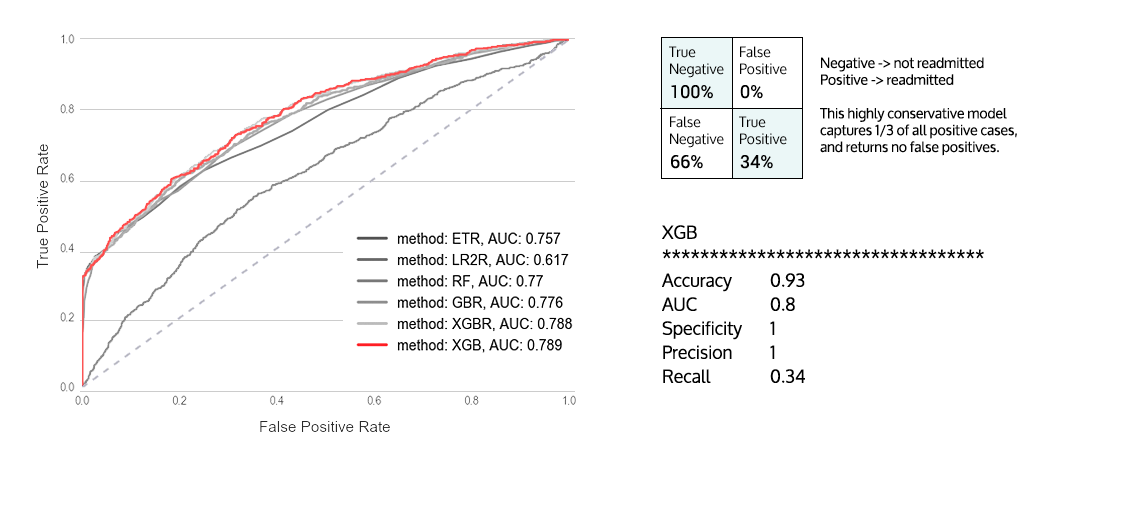
<style>
.page{position:relative;width:1140px;height:520px;background:#ffffff}
.page>*{position:absolute;margin:0}
.t1{font:14px "Oxygen";color:#000000}
.t2{font:18px "Roboto-Regular";color:#000000}
.t3{font:18px/24px "Oxygen";color:#000000}
</style>
<div class="page">
<p class="t1" style="left:669px;top:46px;width:55px;height:32px">True<br>Negative</p>
<p class="t1" style="left:740px;top:46px;width:47px;height:29px">False<br>Positive</p>
<p class="t1" style="left:820px;top:57px;width:197px;height:99px">Negative -&gt; not readmitted<br>Positive -&gt; readmitted<br><br>This highly conservative model <br>captures 1/3 of all positive cases,<br>and returns no false positives.</p>
<p class="t2" style="left:671px;top:85px;width:42px;height:14px">100%</p>
<p class="t2" style="left:740px;top:85px;width:23px;height:14px">0%</p>
<p class="t1" style="left:670px;top:116px;width:54px;height:32px">False<br>Negative</p>
<p class="t1" style="left:739px;top:116px;width:48px;height:29px">True<br>Positive</p>
<p class="t2" style="left:671px;top:155px;width:32px;height:14px">66%</p>
<p class="t2" style="left:740px;top:155px;width:33px;height:14px">34%</p>
<p class="t3" style="left:662px;top:225px;width:322px;height:158px">XGB <br>**********************************<br>Accuracy  0.93<br>AUC   0.8<br>Specificity  1<br>Precision  1<br>Recall   0.34</p>
</div>
